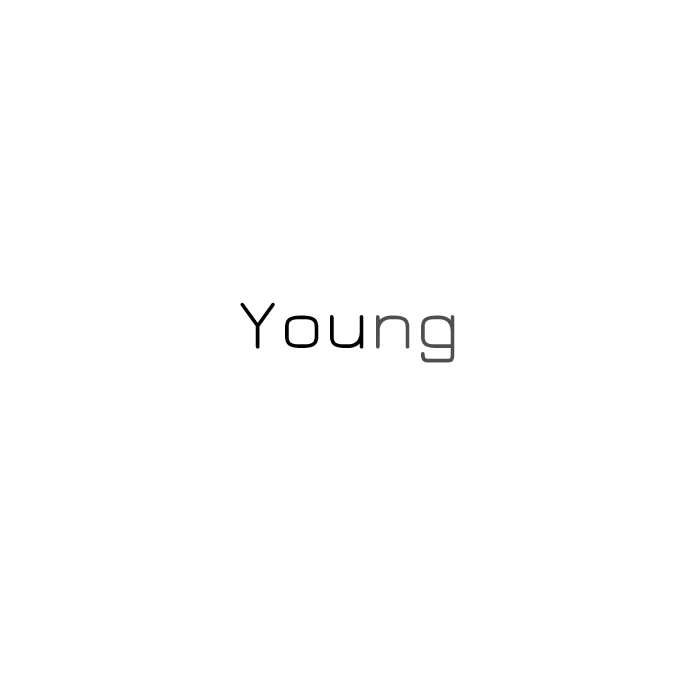
<style>
.page{position:relative;width:700px;height:700px;background:#ffffff}
.page>*{position:absolute;margin:0}
.t1{font:72px "JuraBook";color:#010101}
.t2{font:72px "JuraBook";color:#4f4f4f}
</style>
<div class="page">
<p class="t1" style="left:240px;top:302px;width:215px;height:61px">You<span class="t2">ng</span></p>
</div>
